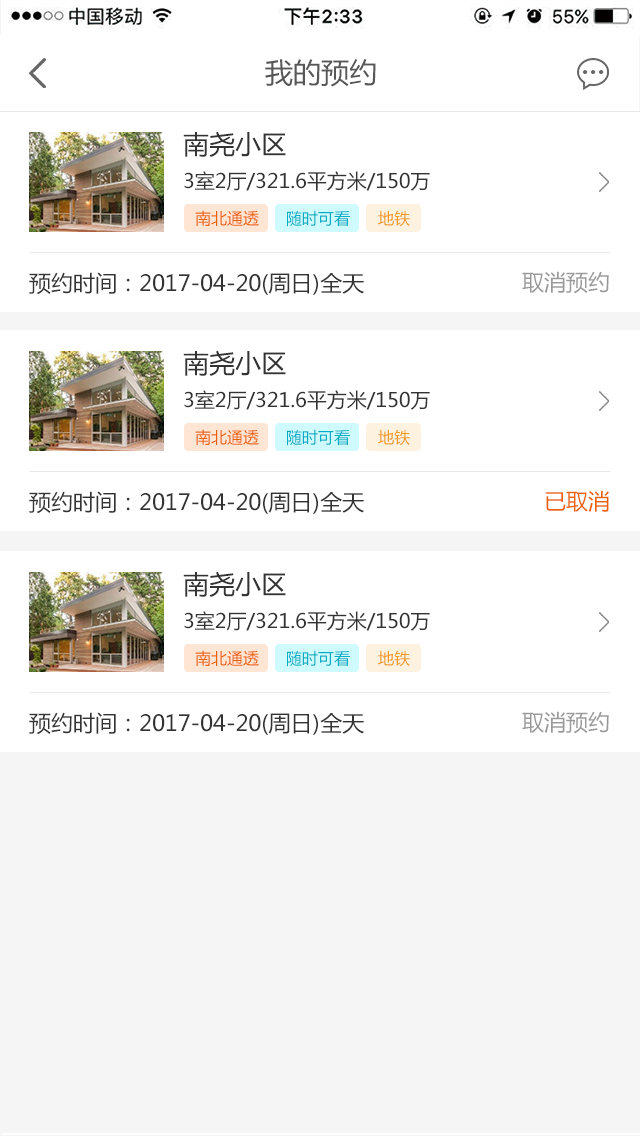
<style>
.page{position:relative;width:640px;height:1136px;background:#ffffff}
.page>*{position:absolute;margin:0}
.t1{font:28px "MicrosoftYaHei";color:#585757}
.t2{font:26px "MicrosoftYaHei";color:#333333}
.t3{font:20px "MicrosoftYaHei";color:#333333}
.t4{font:16px "MicrosoftYaHei";color:#eb6100}
.t5{font:16px "MicrosoftYaHei";color:#00acc3}
.t6{font:16px "MicrosoftYaHei";color:#f19a21}
.t7{font:22px "MicrosoftYaHei";color:#333333}
.t8{font:22px "MicrosoftYaHei";color:#999999}
.t9{font:22px "MicrosoftYaHei";color:#ec6100}
</style>
<div class="page">
<p class="t1" style="left:265px;top:59px;width:111px;height:28px">我的预约</p>
<p class="t2" style="left:183px;top:131px;width:103px;height:26px">南尧小区</p>
<p class="t3" style="left:184px;top:171px;width:246px;height:20px">3室2厅/321.6平方米/150万</p>
<p class="t4" style="left:195px;top:210px;width:64px;height:16px">南北通透</p>
<p class="t5" style="left:287px;top:210px;width:63px;height:17px">随时可看</p>
<p class="t6" style="left:378px;top:210px;width:32px;height:17px">地铁</p>
<p class="t7" style="left:29px;top:272px;width:335px;height:23px">预约时间：2017-04-20(周日)全天</p>
<p class="t8" style="left:522px;top:271px;width:87px;height:23px">取消预约</p>
<p class="t2" style="left:183px;top:350px;width:103px;height:26px">南尧小区</p>
<p class="t3" style="left:184px;top:390px;width:246px;height:20px">3室2厅/321.6平方米/150万</p>
<p class="t4" style="left:195px;top:429px;width:64px;height:16px">南北通透</p>
<p class="t5" style="left:287px;top:429px;width:63px;height:17px">随时可看</p>
<p class="t6" style="left:378px;top:429px;width:32px;height:17px">地铁</p>
<p class="t7" style="left:29px;top:491px;width:335px;height:23px">预约时间：2017-04-20(周日)全天</p>
<p class="t9" style="left:545px;top:490px;width:64px;height:22px">已取消</p>
<p class="t2" style="left:183px;top:571px;width:103px;height:26px">南尧小区</p>
<p class="t3" style="left:184px;top:611px;width:246px;height:20px">3室2厅/321.6平方米/150万</p>
<p class="t4" style="left:195px;top:650px;width:64px;height:16px">南北通透</p>
<p class="t5" style="left:287px;top:650px;width:63px;height:17px">随时可看</p>
<p class="t6" style="left:378px;top:650px;width:32px;height:17px">地铁</p>
<p class="t7" style="left:29px;top:712px;width:335px;height:23px">预约时间：2017-04-20(周日)全天</p>
<p class="t8" style="left:522px;top:711px;width:87px;height:23px">取消预约</p>
</div>
